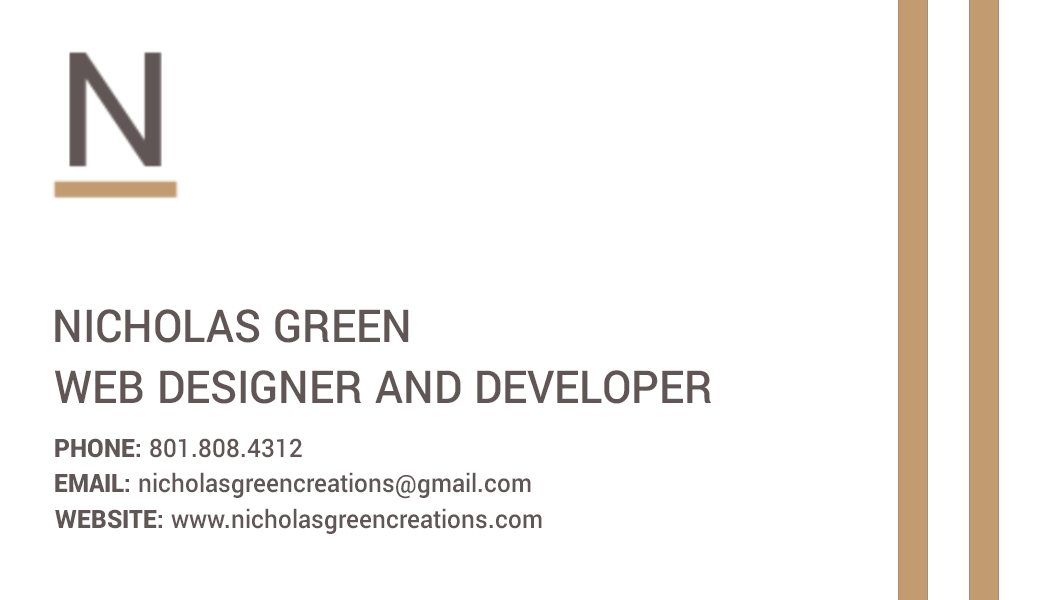
<style>
.page{position:relative;width:1050px;height:600px;background:#ffffff}
.page>*{position:absolute;margin:0}
.t1{font:50.4px "Yantramanav-Medium";color:#615656;text-transform:uppercase;scale:0.95 1}
.t2{font:28.4px "Yantramanav-Medium";color:#615656;scale:0.95 1}
.t3{font:28.4px "Yantramanav-Black";color:#615656;scale:0.95 1}
.t4{font:28.4px "Yantramanav-Black";color:#615656;text-transform:uppercase;scale:0.95 1}
</style>
<div class="page">
<p class="t1" style="left:55px;top:309px;width:354px;height:34px">nicholas green</p>
<p class="t1" style="left:54px;top:370px;width:657px;height:34px">Web Designer and Developer</p>
<p class="t2" style="left:55px;top:438px;width:247px;height:20px"><span class="t3">PHONE:</span> 801.808.4312</p>
<p class="t2" style="left:55px;top:472px;width:476px;height:27px"><span class="t3">EMAIL: </span>nicholasgreencreations@gmail.com</p>
<p class="t2" style="left:55px;top:508px;width:487px;height:26px"><span class="t4">WEBSITE:</span> www.nicholasgreencreations.com</p>
</div>
